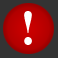
<style>
.page{position:relative;width:58px;height:58px;background:#333333}
.page>*{position:absolute;margin:0}
.t1{font:48px "TimesNewRomanPS-BoldMT";color:#ffffff}
</style>
<div class="page">
<p class="t1" style="left:24px;top:11px;width:8px;height:34px">!</p>
</div>
